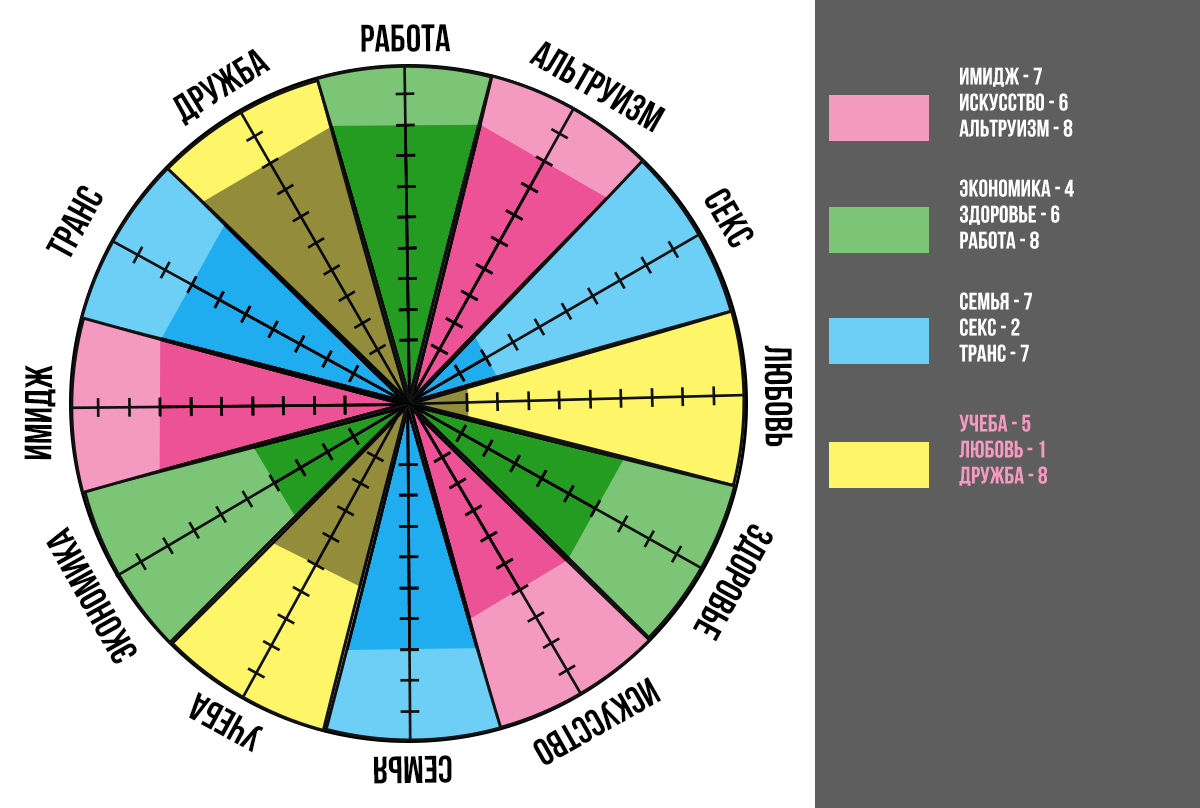
<style>
.page{position:relative;width:1200px;height:808px;background:#5e5e5e}
.page>*{position:absolute;margin:0}
.t1{font:38.4px "BebasNeueBold";color:#000000;text-transform:uppercase}
.t2{font:24px/26px "BebasNeueBold";color:#ffffff;text-transform:uppercase}
.t3{font:24px/26px "BebasNeueBold";color:#f49ac1;text-transform:uppercase}
</style>
<div class="page">
<p class="t1" style="left:361px;top:24px;width:90px;height:28px">работа</p>
<p class="t1" style="left:528px;top:41px;width:138px;height:92px;rotate:30deg">альтруизма</p>
<p class="t1" style="left:172px;top:48px;width:99px;height:79px;rotate:-32deg">дружба</p>
<p class="t2" style="left:959px;top:67px;width:114px;height:70px">Имидж - 7<br>искусство - 6<br>Альтруизм - 8</p>
<p class="t1" style="left:45px;top:185px;width:58px;height:73px;rotate:-61deg">транс</p>
<p class="t2" style="left:960px;top:179px;width:114px;height:70px">Экономика - 4<br>здоровье - 6<br>работа - 8</p>
<p class="t1" style="left:705px;top:188px;width:49px;height:60px;rotate:60deg">секс</p>
<p class="t2" style="left:959px;top:292px;width:73px;height:70px">Семья - 7<br>секс - 2<br>транс - 7</p>
<p class="t1" style="left:764px;top:345px;width:29px;height:102px;rotate:89deg">любовь</p>
<p class="t1" style="left:24px;top:365px;width:32px;height:95px;rotate:-90deg">Имидж</p>
<p class="t3" style="left:959px;top:414px;width:88px;height:72px">Учеба - 5<br>Любовь - 1 <br>дружба - 8</p>
<p class="t1" style="left:46px;top:526px;width:91px;height:138px;rotate:-119deg">экономика</p>
<p class="t1" style="left:692px;top:524px;width:81px;height:118px;rotate:119deg">здоровье</p>
<p class="t1" style="left:533px;top:677px;width:129px;height:88px;rotate:150deg">искусство</p>
<p class="t1" style="left:189px;top:692px;width:75px;height:61px;rotate:-151deg">Учеба</p>
<p class="t1" style="left:373px;top:755px;width:79px;height:29px;rotate:179deg">семья</p>
</div>
